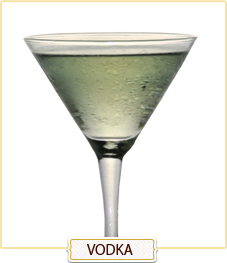
<style>
.page{position:relative;width:227px;height:263px;background:#ffffff}
.page>*{position:absolute;margin:0}
.t1{font:14px "KozGoPro-Regular";color:#441106}
</style>
<div class="page">
<p class="t1" style="left:87px;top:244px;width:46px;height:11px">VODKA</p>
</div>
